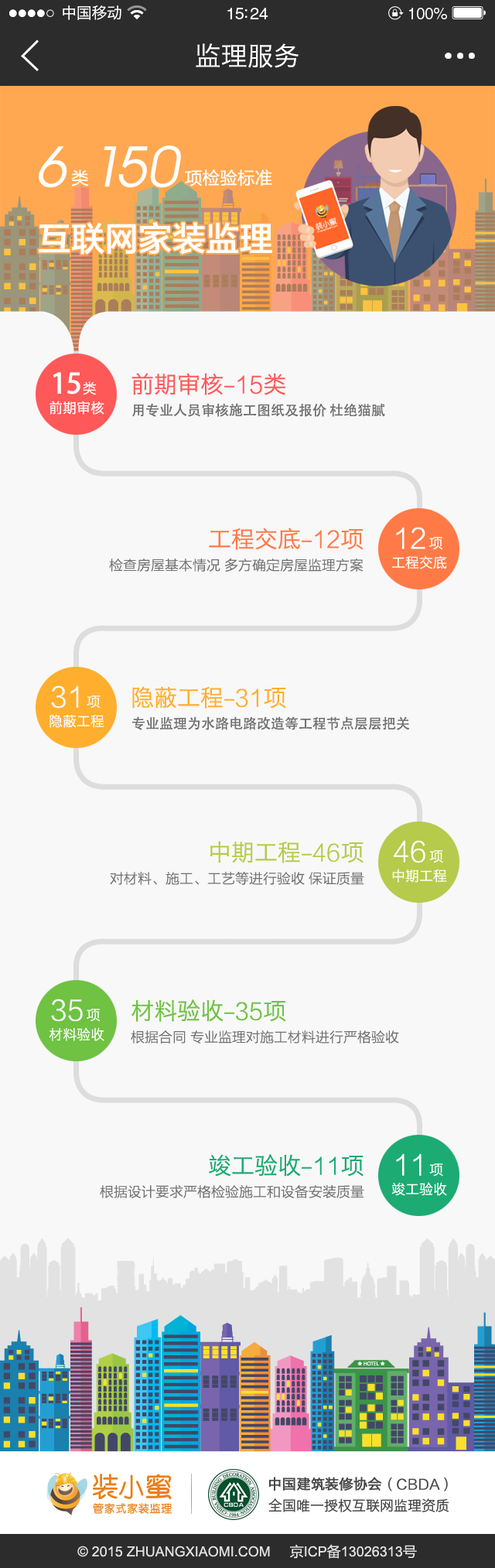
<style>
.page{position:relative;width:495px;height:1568px;background:#f8f8f8}
.page>*{position:absolute;margin:0}
.t1{font:15.5px "HiraginoSansGB-W3";letter-spacing:-0.02em;color:#ffffff}
.t2{font:16.6px "HelveticaLTStd-Roman";letter-spacing:-0.02em;color:#ffffff}
.t3{font:16px "HelveticaLTStd-Roman";letter-spacing:-0.02em;color:#ffffff}
.t4{font:26.3px "HiraginoSansGB-W3";color:#ffffff}
.t5{font:56.2px "AvantGardeITCbyBT-Book";color:#ffffff;font-style:italic}
.t6{font:17.5px "FZLTHJW--GB1-0";color:#ffffff}
.t7{font:33.7px "FZLTZHK--GBK1-0";color:#ffffff}
.t8{font:27.8px "AdobeHeitiStd-Regular";color:#ffffff}
.t9{font:13.9px "HiraginoSansGB-W3";color:#ffffff}
.t10{font:23.2px "HiraginoSansGB-W3";color:#ff5858}
.t11{font:23.2px "FZLTXHK";color:#ff5858}
.t12{font:13.9px "AdobeHeitiStd-Regular";color:#707070}
.t13{font:23.2px "HiraginoSansGB-W3";color:#ff7a46}
.t14{font:23.2px "FZLTXHK";color:#ff7a46}
.t15{font:27.8px "FZLTXHK";color:#ffffff}
.t16{font:13.9px "FZLTXHK";color:#707070}
.t17{font:23.2px "HiraginoSansGB-W3";color:#ffae2e}
.t18{font:23.2px "FZLTXHK";color:#ffae2e}
.t19{font:23.2px "HiraginoSansGB-W3";color:#b6ca4c}
.t20{font:23.2px "FZLTXHK";color:#b6ca4c}
.t21{font:23.2px "HiraginoSansGB-W3";color:#6fc242}
.t22{font:23.2px "FZLTXHK";color:#6fc242}
.t23{font:23.2px "HiraginoSansGB-W3";color:#1cab73}
.t24{font:23.2px "FZLTXHK";color:#1cab73}
.t25{font:13.9px "HiraginoSansGB-W3";color:#464646;font-weight:bold}
.t26{font:13.9px "FZLTXHK";color:#464646;font-weight:bold}
.t27{font:13.9px "HiraginoSansGB-W3";color:#464646}
.t28{font:13.9px "ArialMT";color:#e2e2e2}
.t29{font:13.9px "MicrosoftYaHei";color:#e2e2e2}
</style>
<div class="page">
<p class="t1" style="left:63px;top:5px;width:58px;height:15px">中国移动</p>
<p class="t2" style="left:227px;top:8px;width:41px;height:11px">15:24</p>
<p class="t3" style="left:409px;top:8px;width:38px;height:11px">100%</p>
<p class="t4" style="left:196px;top:43px;width:103px;height:25px">监理服务</p>
<p class="t5" style="left:39px;top:146px;width:28px;height:42px">6</p>
<p class="t5" style="left:104px;top:146px;width:13px;height:41px">1</p>
<p class="t5" style="left:118px;top:145px;width:63px;height:43px">50</p>
<p class="t6" style="left:71px;top:169px;width:201px;height:17px">类                     项检验标准</p>
<p class="t7" style="left:39px;top:222px;width:233px;height:33px">互联网家装监理</p>
<p class="t8" style="left:53px;top:372px;width:43px;height:23px">15 <span class="t9">类</span></p>
<p class="t10" style="left:132px;top:373px;width:153px;height:22px">前期审核-<span class="t11">15</span>类</p>
<p class="t9" style="left:50px;top:401px;width:54px;height:14px">前期审核</p>
<p class="t12" style="left:132px;top:403px;width:253px;height:14px">用专业人员审核施工图纸及报价 杜绝猫腻</p>
<p class="t13" style="left:209px;top:528px;width:155px;height:22px">工程交底-<span class="t14">12</span>项</p>
<p class="t15" style="left:396px;top:527px;width:46px;height:23px">12 <span class="t9">项</span></p>
<p class="t9" style="left:392px;top:555px;width:55px;height:14px">工程交底</p>
<p class="t16" style="left:109px;top:559px;width:255px;height:13px">检查房屋基本情况 多方确定房屋监理方案</p>
<p class="t15" style="left:51px;top:685px;width:50px;height:24px">31 <span class="t9">项</span></p>
<p class="t17" style="left:132px;top:686px;width:154px;height:23px">隐蔽工程-<span class="t18">31</span>项</p>
<p class="t9" style="left:50px;top:714px;width:54px;height:14px">隐蔽工程</p>
<p class="t12" style="left:132px;top:716px;width:278px;height:14px">专业监理为水路电路改造等工程节点层层把关</p>
<p class="t19" style="left:210px;top:841px;width:154px;height:22px">中期工程-<span class="t20">46</span>项</p>
<p class="t15" style="left:393px;top:840px;width:50px;height:23px">46 <span class="t9">项</span></p>
<p class="t9" style="left:392px;top:869px;width:55px;height:14px">中期工程</p>
<p class="t16" style="left:110px;top:872px;width:254px;height:13px">对材料、施工、工艺等进行验收 保证质量</p>
<p class="t15" style="left:51px;top:999px;width:49px;height:23px">35 <span class="t9">项</span></p>
<p class="t21" style="left:132px;top:999px;width:154px;height:23px">材料验收-<span class="t22">35</span>项</p>
<p class="t9" style="left:49px;top:1027px;width:55px;height:14px">材料验收</p>
<p class="t16" style="left:131px;top:1030px;width:268px;height:14px">根据合同 专业监理对施工材料进行严格验收</p>
<p class="t23" style="left:209px;top:1154px;width:155px;height:23px">竣工验收-<span class="t24">11</span>项</p>
<p class="t15" style="left:396px;top:1153px;width:47px;height:24px">11 <span class="t9">项</span></p>
<p class="t9" style="left:391px;top:1182px;width:56px;height:14px">竣工验收</p>
<p class="t16" style="left:100px;top:1185px;width:264px;height:13px">根据设计要求严格检验施工和设备安装质量</p>
<p class="t25" style="left:268px;top:1477px;width:180px;height:14px">中国建筑装修协会<span class="t26">（CBDA）</span></p>
<p class="t27" style="left:268px;top:1498px;width:181px;height:14px">全国唯一授权互联网监理资质</p>
<p class="t28" style="left:77px;top:1544px;width:340px;height:15px">© 2015 ZHUANGXIAOMI.COM     <span class="t29">京</span>ICP<span class="t29">备</span>13026313<span class="t29">号</span></p>
</div>
